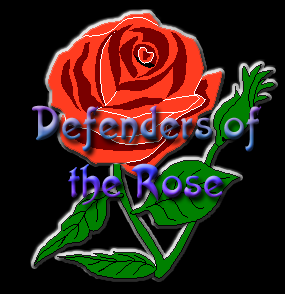
<style>
.page{position:relative;width:285px;height:294px;background:#000000}
.page>*{position:absolute;margin:0}
.t1{font:48px "Artistik"}
</style>
<div class="page">
<p class="t1" style="left:32px;top:105px;width:230px;height:100px;text-align:center">Defenders of<br>the Rose</p>
</div>
